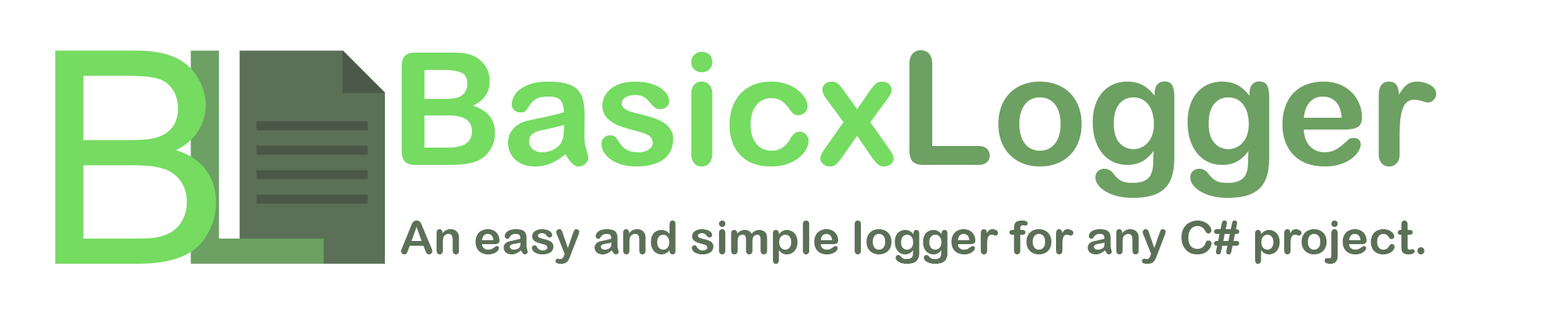
<style>
.page{position:relative;width:1568px;height:314px;background:#ffffff}
.page>*{position:absolute;margin:0}
.t1{font:156.8px "ArialRoundedMTBold";color:#75db61}
.t2{font:156.8px "ArialRoundedMTBold";color:#6da063}
.t3{font:47px "ArialRoundedMTBold";color:#5b7057}
</style>
<div class="page">
<p class="t1" style="left:401px;top:50px;width:1035px;height:148px">Basicx<span class="t2">Logger</span></p>
<p class="t3" style="left:401px;top:220px;width:1024px;height:43px">An easy and simple logger for any C# project.</p>
</div>
